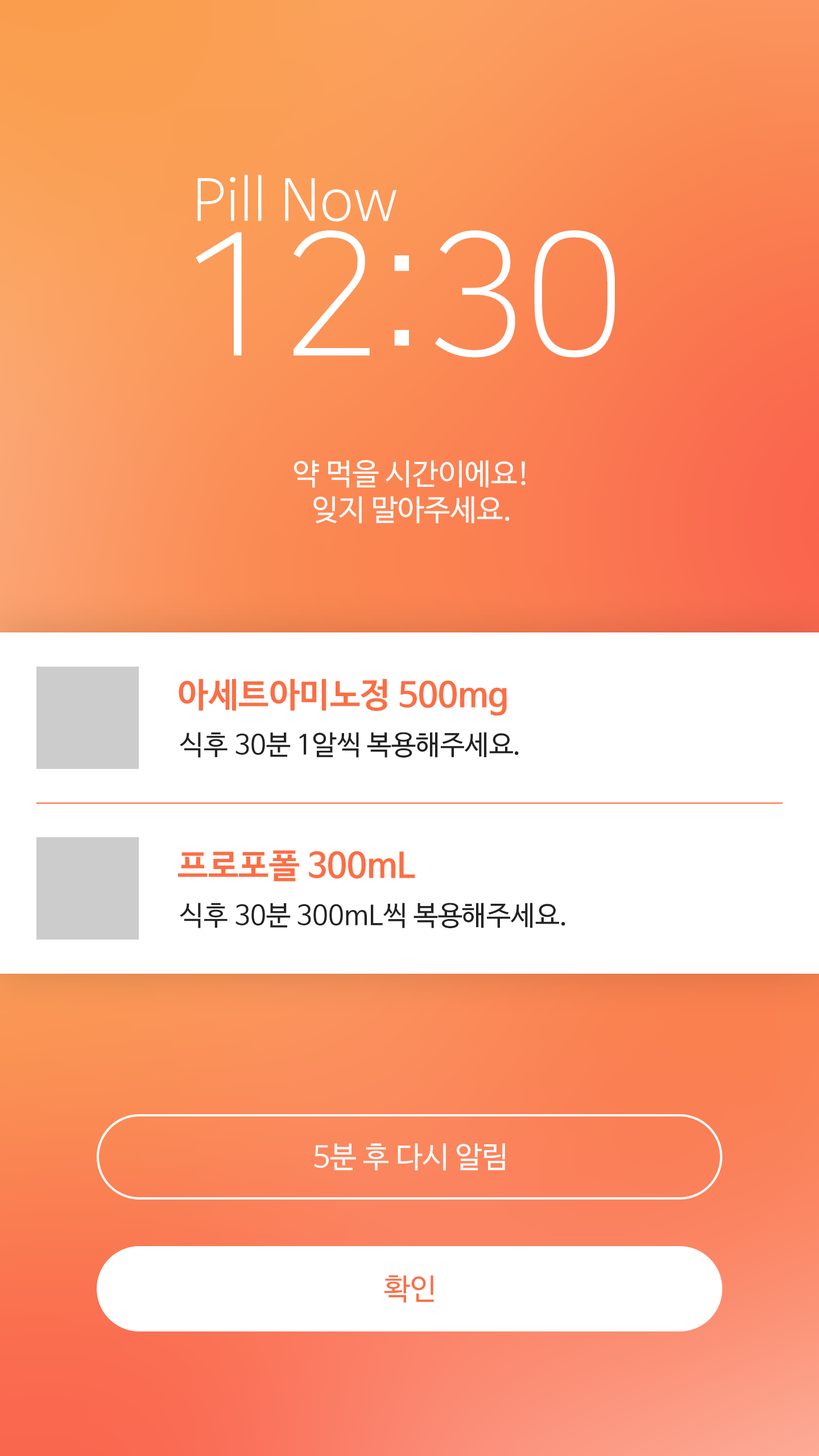
<style>
.page{position:relative;width:819px;height:1456px;background:#ffffff}
.page>*{position:absolute;margin:0}
.t1{font:56.9px "NanumBarunGothicLight";color:#ffffff}
.t2{font:170.6px "NanumSquareOTFL";color:#ffffff}
.t3{font:29.6px "NanumBarunGothic";color:#ffffff}
.t4{font:34.1px "NanumBarunGothicBold";color:#fa6f45}
.t5{font:27.3px "NanumBarunGothic";color:#222222}
.t6{font:29.6px "NanumBarunGothic";color:#fa6f45}
</style>
<div class="page">
<p class="t1" style="left:197px;top:175px;width:199px;height:47px">Pill Now</p>
<p class="t2" style="left:196px;top:230px;width:419px;height:128px">12:30</p>
<p class="t3" style="left:294px;top:460px;width:232px;height:63px;text-align:center">약 먹을 시간이에요!<br>잊지 말아주세요.</p>
<p class="t4" style="left:179px;top:679px;width:328px;height:37px">아세트아미노정 500mg</p>
<p class="t5" style="left:180px;top:732px;width:339px;height:26px">식후 30분 1알씩 복용해주세요.</p>
<p class="t4" style="left:178px;top:850px;width:237px;height:32px">프로포폴 300mL</p>
<p class="t5" style="left:180px;top:903px;width:385px;height:25px">식후 30분 300mL씩 복용해주세요.</p>
<p class="t3" style="left:315px;top:1143px;width:190px;height:27px">5분 후 다시 알림</p>
<p class="t6" style="left:384px;top:1275px;width:50px;height:28px">확인</p>
</div>
